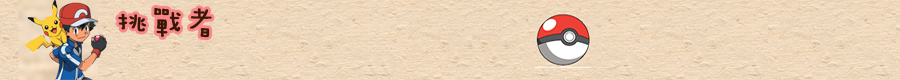
<style>
.page{position:relative;width:900px;height:80px}
.page>*{position:absolute;margin:0}
.t1{font:35.8px "DFEr-W3-WIN-BF";color:#361708;font-weight:bold;scale:0.94 1}
</style>
<div class="page">
<p class="t1" style="left:118px;top:7px;width:94px;height:31px">挑戰者</p>
</div>
